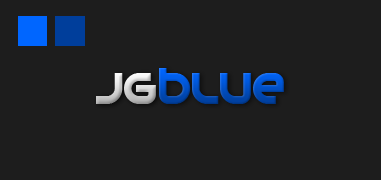
<style>
.page{position:relative;width:381px;height:180px;background:#1d1d1d}
.page>*{position:absolute;margin:0}
.t1{font:60px "PlanetMegapolis"}
</style>
<div class="page">
<p class="t1" style="left:96px;top:73px;width:60px;height:31px">jg</p>
<p class="t1" style="left:159px;top:68px;width:125px;height:36px">blue</p>
</div>
